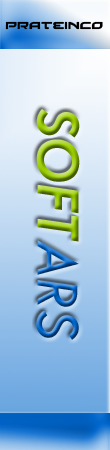
<style>
.page{position:relative;width:110px;height:450px}
.page>*{position:absolute;margin:0}
.t1{font:64px "TwCenMT-BoldItalic"}
.t2{font:64px "TwCenMT-Italic"}
</style>
<div class="page">
<p class="t1" style="left:36px;top:108px;width:44px;height:232px;rotate:90deg">SOFT<span class="t2">ARS</span></p>
</div>
